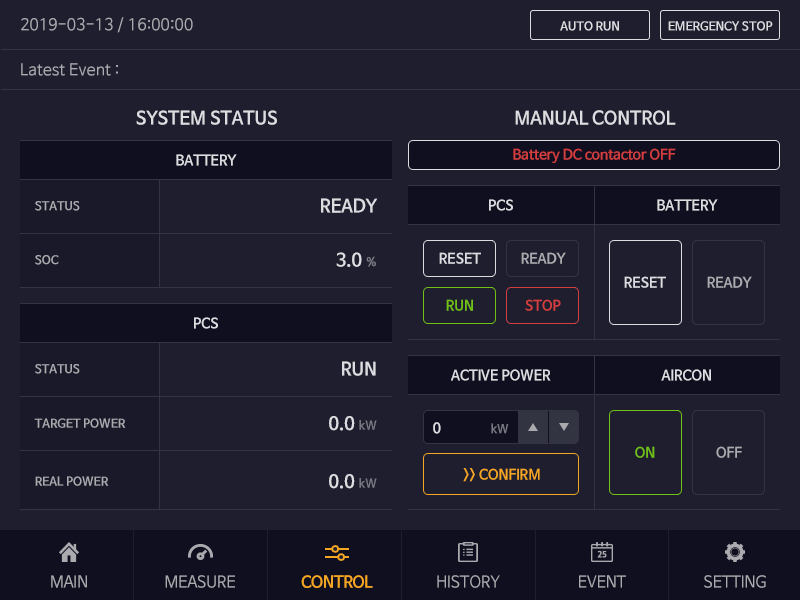
<style>
.page{position:relative;width:800px;height:600px;background:#1e1e2f}
.page>*{position:absolute;margin:0}
.t1{font:16px "NanumBarunGothic";color:#aaaaaf}
.t2{font:12px "NanumBarunGothicBold";color:#dcdce1}
.t3{font:18px "NanumBarunGothicBold";color:#dcdce1}
.t4{font:14px "NanumBarunGothicBold";color:#d33f3f}
.t5{font:14px "NanumBarunGothicBold";color:#dcdce1}
.t6{font:18px/54px "NanumBarunGothicBold";color:#dcdce1}
.t7{font:12px/54px "NanumBarunGothicBold";color:#787882}
.t8{font:12px/54px "NanumBarunGothicBold";color:#aaaaaf}
.t9{font:14px "NanumBarunGothicBold";color:#aaaaaf}
.t10{font:14px "NanumBarunGothicBold";color:#71c016}
.t11{font:12px/54.5px "NanumBarunGothicBold";color:#aaaaaf}
.t12{font:12px/58px "NanumBarunGothicBold";color:#aaaaaf}
.t13{font:18px/54.5px "NanumBarunGothicBold";color:#dcdce1}
.t14{font:12px/54.5px "NanumBarunGothicBold";color:#787882}
.t15{font:18px/58px "NanumBarunGothicBold";color:#dcdce1}
.t16{font:12px/58px "NanumBarunGothicBold";color:#787882}
.t17{font:12px "NanumBarunGothicBold";color:#787882}
.t18{font:14px "NanumBarunGothicBold";color:#f5a623}
.t19{font:16px "NanumBarunGothic";letter-spacing:-0.025em;color:#aaaaaf}
.t20{font:16px "NanumBarunGothicBold";letter-spacing:-0.025em;color:#f5a623}
</style>
<div class="page">
<p class="t1" style="left:21px;top:17px;width:172px;height:16px">2019-03-13 / 16:00:00</p>
<p class="t2" style="left:560px;top:21px;width:59px;height:10px">AUTO RUN</p>
<p class="t2" style="left:668px;top:21px;width:105px;height:10px">EMERGENCY STOP</p>
<p class="t1" style="left:21px;top:63px;width:97px;height:13px">Latest Event :</p>
<p class="t3" style="left:136px;top:110px;width:141px;height:15px">SYSTEM STATUS</p>
<p class="t3" style="left:515px;top:110px;width:161px;height:15px">MANUAL CONTROL</p>
<p class="t4" style="left:513px;top:148px;width:163px;height:15px">Battery DC contactor OFF</p>
<p class="t5" style="left:176px;top:154px;width:61px;height:12px">BATTERY</p>
<p class="t6" style="left:321px;top:198px;width:57px;height:69px;text-align:right">READY<br>3.0 <span class="t7">%</span></p>
<p class="t8" style="left:35px;top:201px;width:45px;height:64px">STATUS<br>SOC</p>
<p class="t5" style="left:489px;top:199px;width:24px;height:12px">PCS</p>
<p class="t5" style="left:657px;top:199px;width:61px;height:12px">BATTERY</p>
<p class="t5" style="left:439px;top:252px;width:42px;height:12px">RESET</p>
<p class="t9" style="left:521px;top:252px;width:45px;height:12px">READY</p>
<p class="t5" style="left:624px;top:276px;width:42px;height:12px">RESET</p>
<p class="t9" style="left:707px;top:276px;width:45px;height:12px">READY</p>
<p class="t10" style="left:446px;top:299px;width:27px;height:12px">RUN</p>
<p class="t4" style="left:525px;top:299px;width:36px;height:12px">STOP</p>
<p class="t5" style="left:194px;top:317px;width:24px;height:12px">PCS</p>
<p class="t11" style="left:34px;top:364px;width:92px;height:122px">STATUS<br>TARGET POWER<span class="t12"><br>REAL POWER</span></p>
<p class="t13" style="left:329px;top:361px;width:48px;height:128px;text-align:right">RUN<br>0.0 <span class="t14">kW<br></span><span class="t15">0.0 </span><span class="t16">kW</span></p>
<p class="t5" style="left:451px;top:369px;width:100px;height:12px">ACTIVE POWER</p>
<p class="t5" style="left:661px;top:369px;width:50px;height:12px">AIRCON</p>
<p class="t5" style="left:433px;top:422px;width:8px;height:12px">0</p>
<p class="t17" style="left:491px;top:423px;width:18px;height:11px">kW</p>
<p class="t10" style="left:635px;top:446px;width:20px;height:12px">ON</p>
<p class="t9" style="left:716px;top:446px;width:26px;height:12px">OFF</p>
<p class="t18" style="left:463px;top:468px;width:77px;height:14px">&gt;&gt; CONFIRM</p>
<p class="t19" style="left:51px;top:575px;width:36px;height:13px">MAIN</p>
<p class="t19" style="left:165px;top:575px;width:70px;height:13px">MEASURE</p>
<p class="t20" style="left:301px;top:575px;width:72px;height:13px">CONTROL</p>
<p class="t19" style="left:437px;top:575px;width:63px;height:13px">HISTORY</p>
<p class="t19" style="left:579px;top:575px;width:47px;height:13px">EVENT</p>
<p class="t19" style="left:704px;top:575px;width:62px;height:13px">SETTING</p>
</div>
